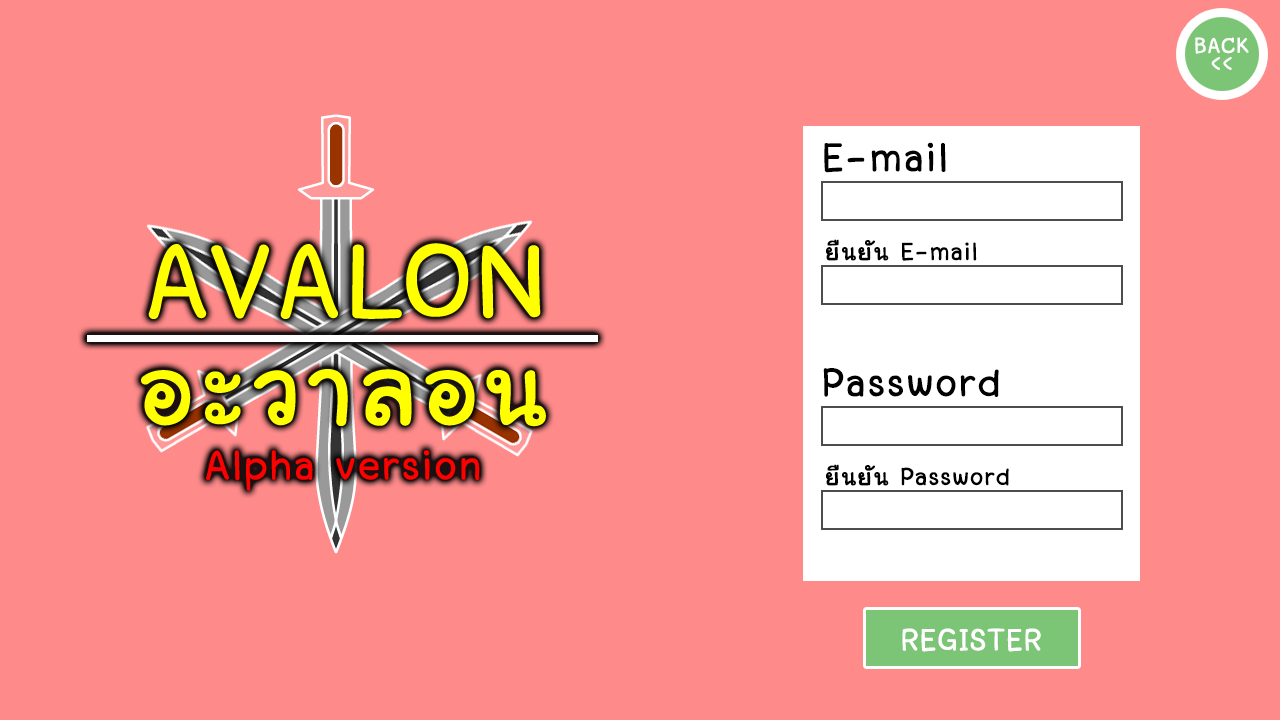
<style>
.page{position:relative;width:1280px;height:720px;background:#ff8a8a}
.page>*{position:absolute;margin:0}
.t1{font:29.1px/17px "LayijiMaHaNiYomV1.5";letter-spacing:0.01em;color:#ffffff;font-weight:bold}
.t2{font:55.8px "LayijiMaHaNiYomV1.5";letter-spacing:0.01em;color:#000000;font-weight:bold}
.t3{font:145.6px "LayijiMaHaNiYomV1.5";letter-spacing:0.01em;color:#ffff00;font-weight:bold}
.t4{font:34.3px "LayijiMaHaNiYomV1.5";letter-spacing:0.01em;color:#000000;font-weight:bold}
.t5{font:57.5px "LayijiMaHaNiYomV1.5";letter-spacing:0.01em;color:#ff0000;font-weight:bold}
.t6{font:42.9px "LayijiMaHaNiYomV1.5";letter-spacing:0.01em;color:#ffffff;font-weight:bold}
</style>
<div class="page">
<p class="t1" style="left:1195px;top:37px;width:54px;height:33px;text-align:center">BACK<br>&lt;&lt;</p>
<p class="t2" style="left:824px;top:142px;width:122px;height:31px">E-mail</p>
<p class="t3" style="left:148px;top:243px;width:393px;height:76px">AVALON</p>
<p class="t4" style="left:826px;top:239px;width:151px;height:22px">ยืนยัน E-mail</p>
<p class="t3" style="left:141px;top:369px;width:405px;height:58px">อะวาลอน</p>
<p class="t2" style="left:823px;top:368px;width:176px;height:29px">Password</p>
<p class="t5" style="left:206px;top:450px;width:274px;height:41px">Alpha version</p>
<p class="t4" style="left:826px;top:464px;width:183px;height:22px">ยืนยัน Password</p>
<p class="t6" style="left:902px;top:628px;width:139px;height:24px">REGISTER</p>
</div>
